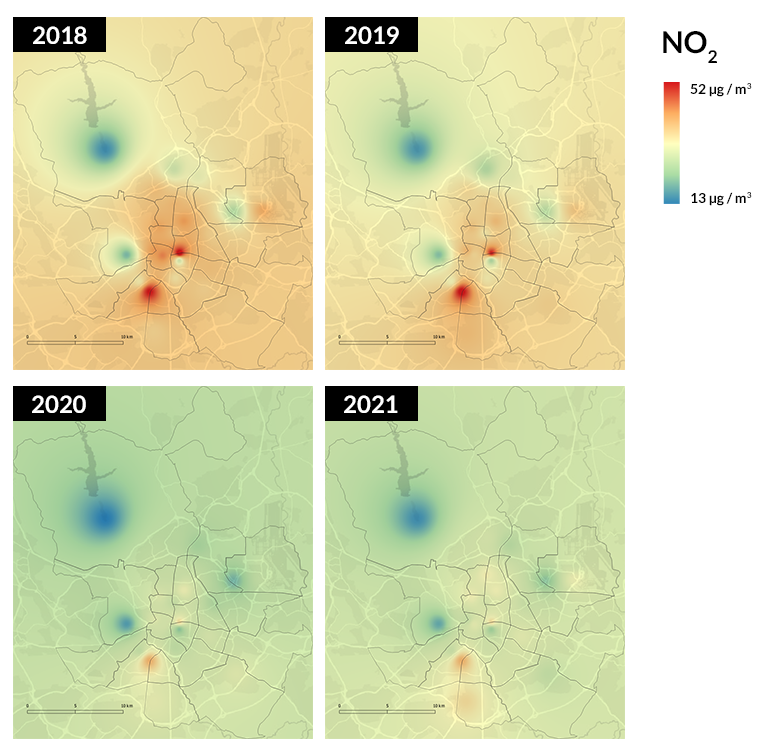
<style>
.page{position:relative;width:780px;height:750px;background:#ffffff}
.page>*{position:absolute;margin:0}
.t1{font:24px "Lato-Bold";color:#ffffff}
.t2{font:30px "Lato-Bold";color:#000000}
.t3{font:14px "Lato-Bold";color:#000000}
</style>
<div class="page">
<p class="t1" style="left:33px;top:26px;width:54px;height:18px">2018</p>
<p class="t1" style="left:345px;top:26px;width:54px;height:18px">2019</p>
<p class="t2" style="left:663px;top:31px;width:54px;height:32px">NO2</p>
<p class="t3" style="left:690px;top:83px;width:62px;height:14px">52 μg / m3</p>
<p class="t3" style="left:691px;top:192px;width:61px;height:14px">13 μg / m3</p>
<p class="t1" style="left:32px;top:395px;width:54px;height:18px">2020</p>
<p class="t1" style="left:344px;top:395px;width:54px;height:18px">2021</p>
</div>
